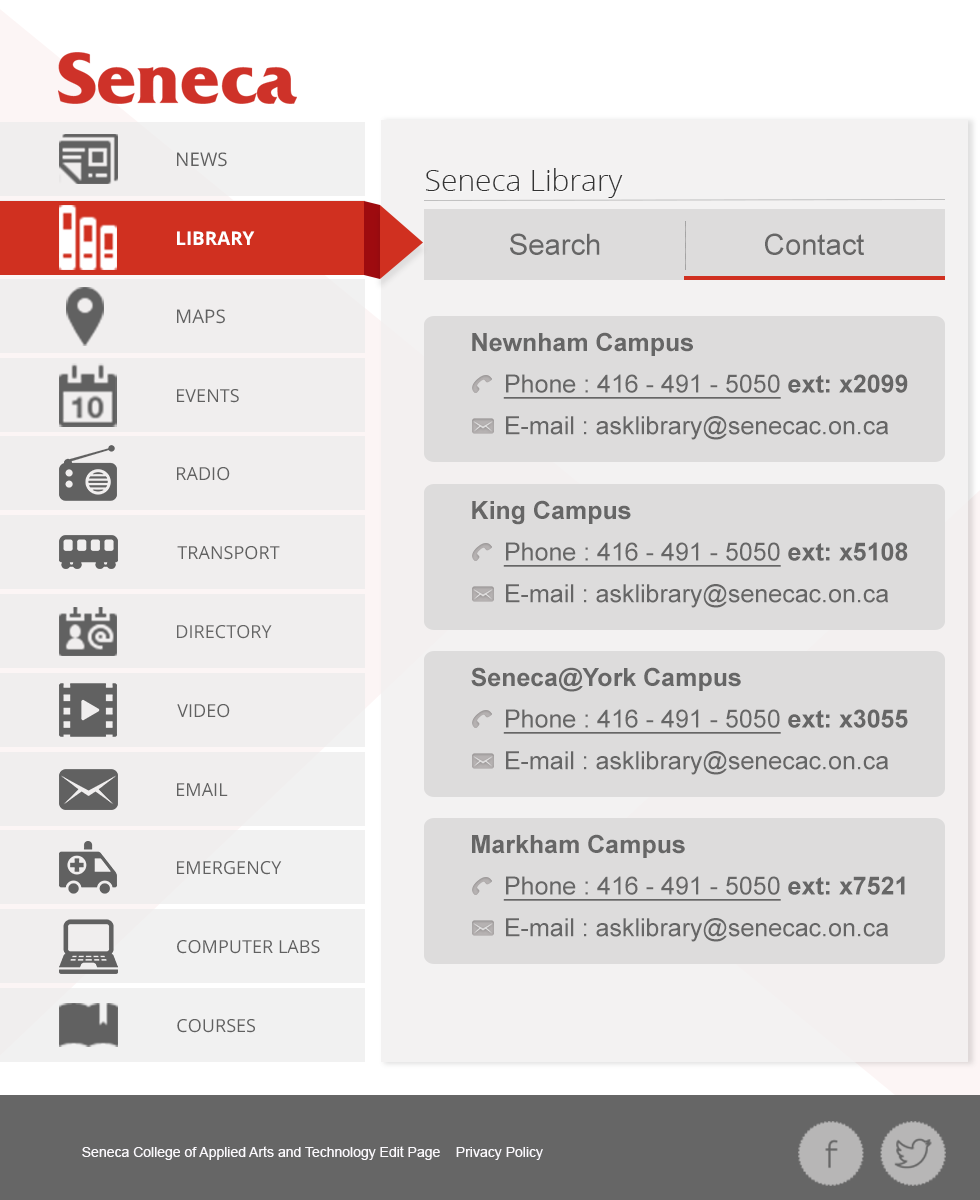
<style>
.page{position:relative;width:980px;height:1200px;background:#dddcdc}
.page>*{position:absolute;margin:0}
.t1{font:30px "OpenSans-Light";color:#333333}
.t2{font:18.7px "OpenSans-Bold";color:#ffffff;text-transform:uppercase}
.t3{font:29.2px "ArialMT";color:#666666}
.t4{font:25px/41.7px "ArialMT";color:#666666}
.t5{font:25px "Arial-BoldMT";color:#666666}
.t6{font:25px/41.7px "ArialMT";color:#666666;text-decoration:underline}
.t7{font:25px/41.7px "Arial-BoldMT";color:#666666}
</style>
<div class="page">
<p class="t1" style="left:426px;top:168px;width:197px;height:30px">Seneca Library</p>
<p class="t2" style="left:177px;top:231px;width:78px;height:14px">Library</p>
<p class="t3" style="left:510px;top:233px;width:90px;height:22px">Search</p>
<p class="t3" style="left:765px;top:233px;width:99px;height:22px">Contact</p>
<p class="t4" style="left:472px;top:332px;width:436px;height:108px"><span class="t5">Newnham Campus<br></span><span class="t6">Phone : 416 - 491 - 5050 </span><span class="t7">ext: x2099<br></span>E-mail : asklibrary@senecac.on.ca</p>
<p class="t4" style="left:472px;top:500px;width:436px;height:108px"><span class="t5">King Campus<br></span><span class="t6">Phone : 416 - 491 - 5050 </span><span class="t7">ext: x5108<br></span>E-mail : asklibrary@senecac.on.ca</p>
<p class="t4" style="left:471px;top:667px;width:437px;height:108px"><span class="t5">Seneca@York Campus<br></span><span class="t6">Phone : 416 - 491 - 5050 </span><span class="t7">ext: x3055<br></span>E-mail : asklibrary@senecac.on.ca</p>
<p class="t4" style="left:472px;top:834px;width:433px;height:108px"><span class="t5">Markham Campus<br></span><span class="t6">Phone : 416 - 491 - 5050 </span><span class="t7">ext: x7521<br></span>E-mail : asklibrary@senecac.on.ca</p>
</div>
